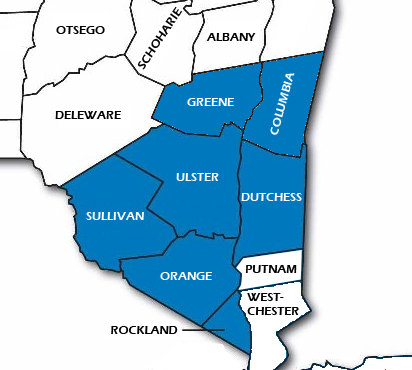
<style>
.page{position:relative;width:412px;height:370px;background:#fefefe}
.page>*{position:absolute;margin:0}
.t1{font:12px "ErasITC-Demi";color:#000000}
.t2{font:12px "ErasITC-Demi";color:#ffffff}
</style>
<div class="page">
<p class="t1" style="left:137px;top:6px;width:45px;height:64px;rotate:-56deg">SCHOHARIE</p>
<p class="t1" style="left:56px;top:26px;width:49px;height:8px">OTSEGO</p>
<p class="t1" style="left:206px;top:33px;width:50px;height:8px">ALBANY</p>
<p class="t2" style="left:270px;top:73px;width:25px;height:62px;rotate:-75deg">COLUMBIA</p>
<p class="t2" style="left:187px;top:98px;width:47px;height:8px">GREENE</p>
<p class="t1" style="left:55px;top:111px;width:66px;height:8px">DELEWARE</p>
<p class="t2" style="left:176px;top:173px;width:43px;height:8px">ULSTER</p>
<p class="t2" style="left:241px;top:193px;width:61px;height:8px">DUTCHESS</p>
<p class="t2" style="left:86px;top:212px;width:58px;height:8px">SULLIVAN</p>
<p class="t1" style="left:245px;top:265px;width:52px;height:8px">PUTNAM</p>
<p class="t2" style="left:160px;top:272px;width:52px;height:8px">ORANGE</p>
<p class="t1" style="left:247px;top:293px;width:52px;height:22px">WEST-<br>CHESTER</p>
<p class="t1" style="left:111px;top:326px;width:67px;height:8px">ROCKLAND</p>
</div>
